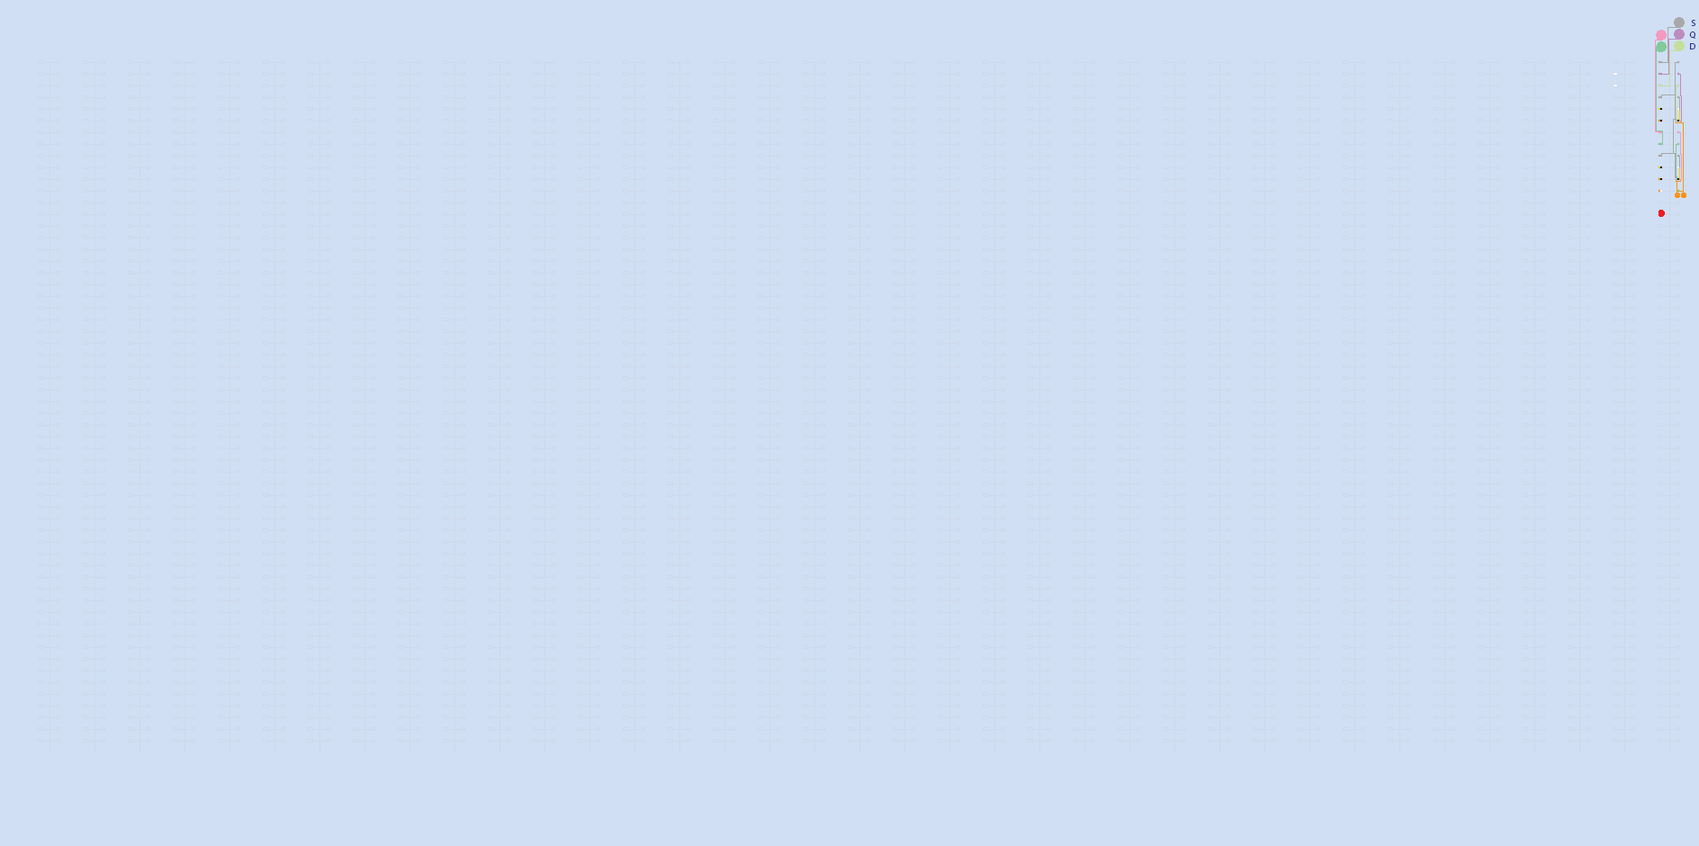
<style>
.page{position:relative;width:1699px;height:846px;background:#d0dff3}
.page>*{position:absolute;margin:0}
.t1{font:9px/11.7px "MyriadPro-Regular";color:#2e3192}
</style>
<div class="page">
<p class="t1" style="left:1689px;top:20px;width:7px;height:30px;text-align:right">S<br>Q<br>D</p>
</div>
